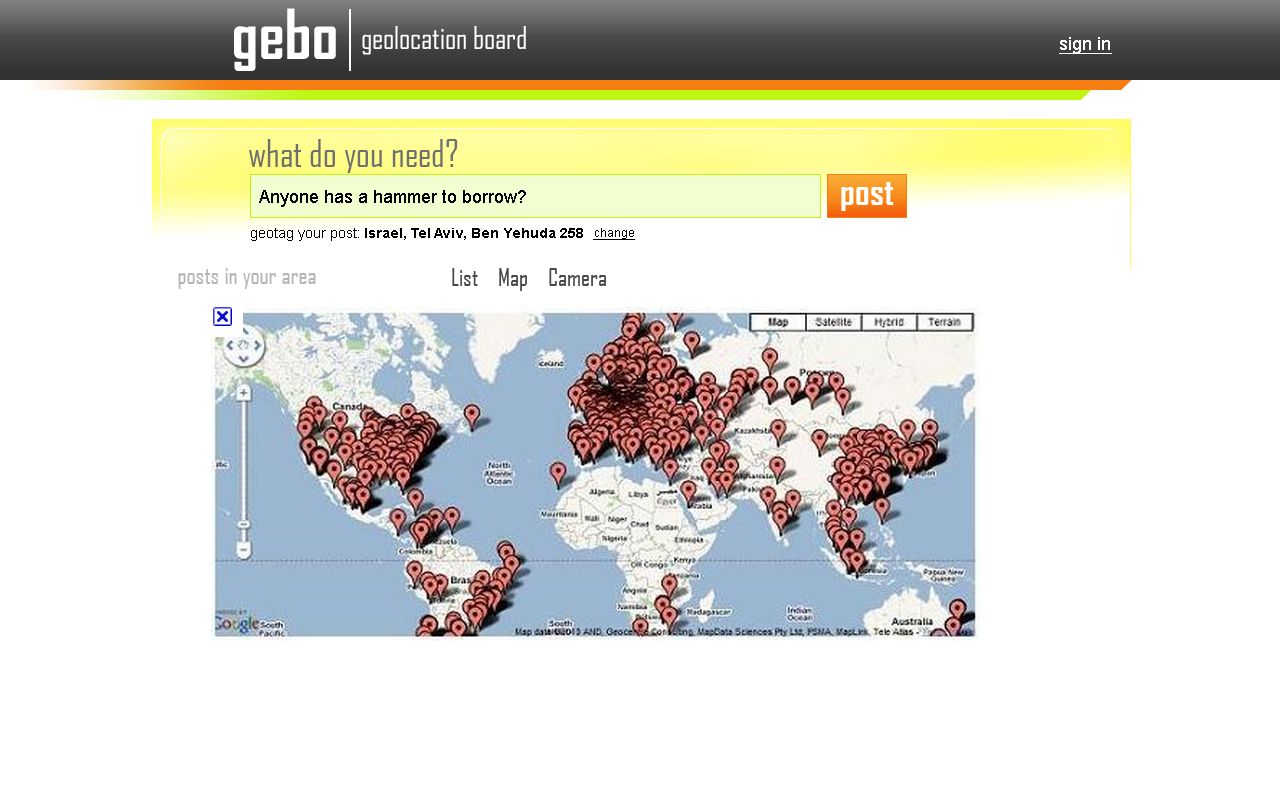
<style>
.page{position:relative;width:1280px;height:800px;background:#ffffff}
.page>*{position:absolute;margin:0}
.t1{font:66px "AgencyFB-Bold";color:#ffffff}
.t2{font:30px "AgencyFB-Reg";color:#ffffff}
.t3{font:18px "ArialMT";color:#ffffff;text-decoration:underline}
.t4{font:36px "AgencyFB-Reg";color:#707070}
.t5{font:36px "AgencyFB-Bold";color:#ffffff}
.t6{font:18px "ArialMT";color:#000000}
.t7{font:14px "ArialMT";color:#000000}
.t8{font:14px "Arial-BoldMT";color:#000000}
.t9{font:12px "ArialMT";color:#000000;text-decoration:underline}
.t10{font:24px "AgencyFB-Reg";color:#b5b5b5}
.t11{font:24px "AgencyFB-Reg";color:#474747}
</style>
<div class="page">
<p class="t1" style="left:234px;top:8px;width:102px;height:63px">gebo</p>
<p class="t2" style="left:362px;top:26px;width:164px;height:29px">geolocation board</p>
<p class="t3" style="left:1059px;top:37px;width:53px;height:17px">sign in</p>
<p class="t4" style="left:249px;top:139px;width:209px;height:34px">what do you need?</p>
<p class="t5" style="left:841px;top:182px;width:53px;height:29px">post</p>
<p class="t6" style="left:259px;top:190px;width:267px;height:17px">Anyone has a hammer to borrow?</p>
<p class="t7" style="left:251px;top:228px;width:108px;height:13px">geotag your post:</p>
<p class="t8" style="left:365px;top:228px;width:218px;height:12px">Israel, Tel Aviv, Ben Yehuda 258</p>
<p class="t9" style="left:593px;top:228px;width:42px;height:12px">change</p>
<p class="t10" style="left:178px;top:268px;width:138px;height:21px">posts in your area</p>
<p class="t11" style="left:452px;top:268px;width:154px;height:23px">List    Map    Camera</p>
</div>
